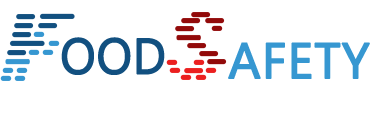
<style>
.page{position:relative;width:382px;height:120px;background:#ffffff}
.page>*{position:absolute;margin:0}
.t1{font:50px "Ebrima";color:#125080;font-weight:bold;scale:0.93 1}
.t2{font:50px "Ebrima";color:#3697d1;font-weight:bold}
</style>
<div class="page">
<p class="t1" style="left:61px;top:37px;width:104px;height:38px">OOD</p>
<p class="t2" style="left:228px;top:42px;width:142px;height:37px">AFETY</p>
</div>
